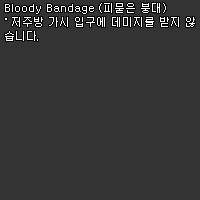
<style>
.page{position:relative;width:200px;height:200px;background:#333333}
.page>*{position:absolute;margin:0}
.t1{font:11px/14px "Dotum";color:#ffffff}
</style>
<div class="page">
<p class="t1" style="left:5px;top:3px;width:190px;height:38px">Bloody Bandage (피묻은 붕대)<br>˚ 저주방 가시 입구에 데미지를 받지 않<br>습니다.</p>
</div>
